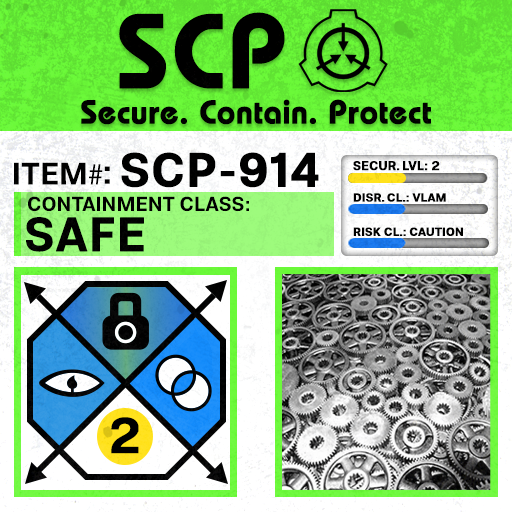
<style>
.page{position:relative;width:512px;height:512px}
.page>*{position:absolute;margin:0}
.t1{font:105.8px "BauhausLT-Demi";color:#000000;font-weight:bold}
.t2{font:33px "BauhausLT-Demi";color:#000000;font-weight:bold}
.t3{font:47.6px "Molde-Semibold";color:#000000;font-weight:bold}
.t4{font:12.5px "Molde-Semibold";color:#000000;font-weight:bold}
.t5{font:31.1px "Molde-Semibold";color:#000000}
.t6{font:31.1px "MyriadPro-Regular";color:#000000}
.t7{font:34.5px "Molde-Semibold";color:#000000}
.t8{font:20.3px "Molde-Semibold";color:#000000}
.t9{font:11.7px "Molde-Semibold";color:#000000;font-weight:bold}
.t10{font:47.8px "Molde-Semibold";color:#000000;font-weight:bold}
</style>
<div class="page">
<p class="t1" style="left:119px;top:12px;width:166px;height:77px">SCP</p>
<p class="t2" style="left:81px;top:99px;width:350px;height:26px">Secure. Contain. Protect</p>
<p class="t3" style="left:121px;top:152px;width:198px;height:36px">SCP-914</p>
<p class="t4" style="left:353px;top:161px;width:87px;height:10px">SECUR. LVL: 2</p>
<p class="t5" style="left:14px;top:162px;width:89px;height:23px">ITEM<span class="t6">#</span></p>
<p class="t7" style="left:104px;top:166px;width:6px;height:18px">:</p>
<p class="t8" style="left:28px;top:196px;width:221px;height:16px">CONTAINMENT CLASS:</p>
<p class="t9" style="left:353px;top:193px;width:93px;height:9px">DISR. CL.: VLAM</p>
<p class="t10" style="left:26px;top:217px;width:118px;height:35px">SAFE</p>
<p class="t9" style="left:353px;top:227px;width:110px;height:9px">RISK CL.: CAUTION</p>
</div>
